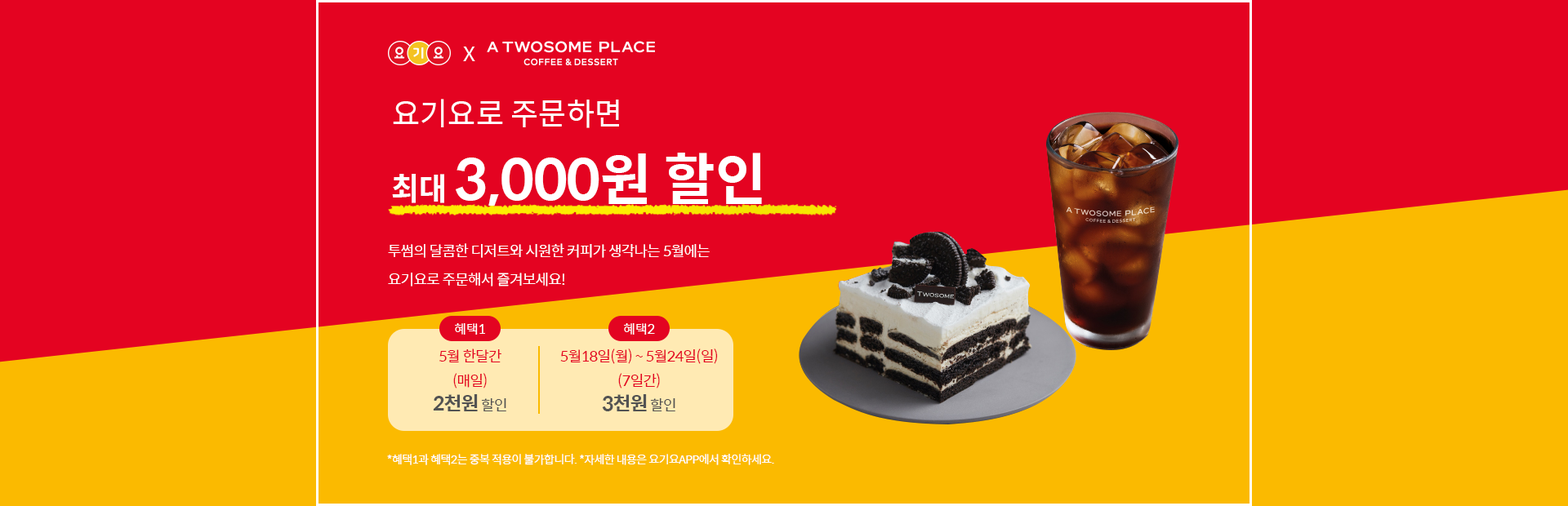
<style>
.page{position:relative;width:1568px;height:506px;background:#e40321}
.page>*{position:absolute;margin:0}
.t1{font:20px "SpoqaHanSans-Regular";color:#ffffff;scale:1.07 1}
.t2{font:30.9px "SpoqaHanSans-Regular";color:#ffffff}
.t3{font:56.7px "SpoqaHanSans-Bold";color:#ffffff}
.t4{font:30.9px "SpoqaHanSans-Bold";color:#ffffff}
.t5{font:14.7px/28.6px "SpoqaHanSans-Regular";letter-spacing:-0.025em;color:#ffffff}
.t6{font:13.1px "SpoqaHanSans-Regular";color:#ffffff}
.t7{font:14.7px/24.5px "SpoqaHanSans-Regular";letter-spacing:-0.025em;color:#e40321}
.t8{font:19.6px/24.5px "SpoqaHanSans-Bold";letter-spacing:-0.025em;color:#535353}
.t9{font:14.7px/24.5px "SpoqaHanSans-Regular";letter-spacing:-0.025em;color:#535353}
.t10{font:11.4px "SpoqaHanSans-Regular";letter-spacing:-0.025em;color:#ffffff}
</style>
<div class="page">
<p class="t1" style="left:463px;top:47px;width:12px;height:14px">X</p>
<p class="t2" style="left:393px;top:99px;width:226px;height:29px">요기요로 주문하면</p>
<p class="t3" style="left:392px;top:153px;width:370px;height:53px"><span class="t4">최대 </span>3,000원 할인</p>
<p class="t5" style="left:388px;top:243px;width:322px;height:44px">투썸의 달콤한 디저트와 시원한 커피가 생각나는 5월에는 <br>요기요로 주문해서 즐겨보세요!</p>
<p class="t6" style="left:455px;top:323px;width:30px;height:12px">혜택1</p>
<p class="t6" style="left:624px;top:323px;width:31px;height:12px">혜택2</p>
<p class="t7" style="left:433px;top:349px;width:73px;height:63px;text-align:center">5월 한달간<br>(매일)<br><span class="t8">2천원</span><span class="t9"> 할인</span></p>
<p class="t7" style="left:560px;top:349px;width:158px;height:63px;text-align:center">5월18일(월) ~ 5월24일(일)<br>(7일간)<br><span class="t8">3천원</span><span class="t9"> 할인</span></p>
<p class="t10" style="left:387px;top:454px;width:387px;height:12px">*혜택1과 혜택2는 중복 적용이 불가합니다. *자세한 내용은 요기요APP에서 확인하세요.</p>
</div>
